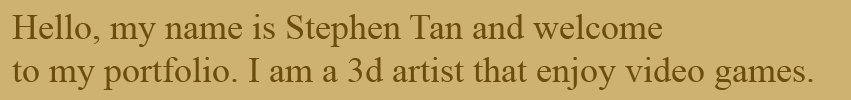
<style>
.page{position:relative;width:851px;height:100px;background:#cdb270}
.page>*{position:absolute;margin:0}
.t1{font:36px "TimesNewRomanPSMT";color:#6c4d0e}
</style>
<div class="page">
<p class="t1" style="left:12px;top:14px;width:801px;height:76px">Hello, my name is Stephen Tan and welcome<br>to my portfolio. I am a 3d artist that enjoy video games.</p>
</div>
